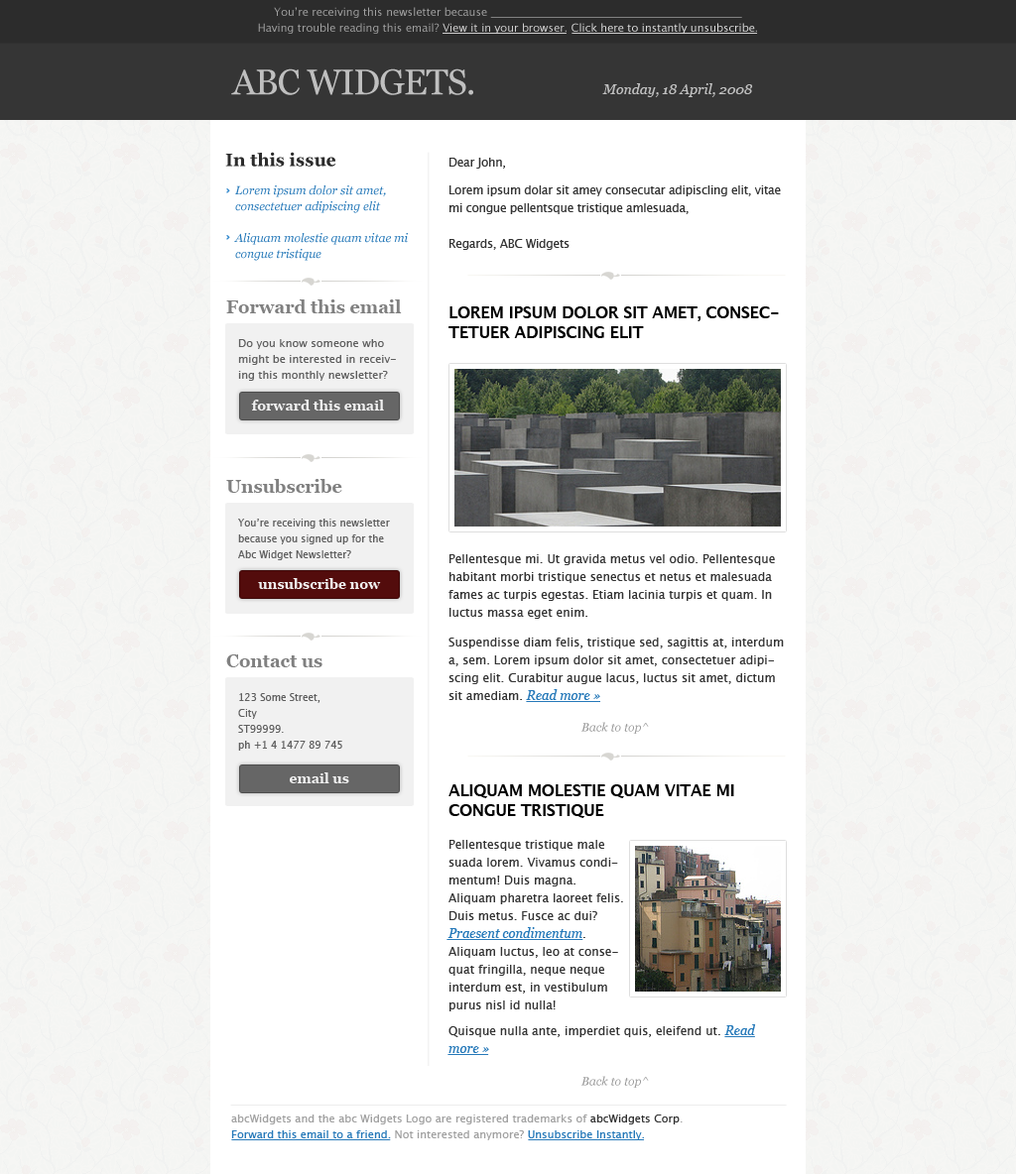
<style>
.page{position:relative;width:1016px;height:1174px;background:#ffffff}
.page>*{position:absolute;margin:0}
.t1{font:10.9px/15.9px "LucidaGrande";color:#a1a1a1}
.t2{font:10.9px/15.9px "LucidaGrande";color:#d0cfcf}
.t3{font:10.9px/15.9px "LucidaGrande";color:#dbdbdb}
.t4{font:35.7px "Georgia";letter-spacing:-0.03em;color:#bfbfbf;text-transform:uppercase}
.t5{font:13.9px "Georgia-Italic";color:#bfbfbf}
.t6{font:17.9px "Georgia-Bold";color:#2c2c2c}
.t7{font:11.9px/17.9px "LucidaGrande";letter-spacing:-0.025em;color:#333333}
.t8{font:11.9px/19.8px "LucidaGrande";letter-spacing:-0.025em;color:#333333}
.t9{font:11.9px/9.9px "LucidaGrande";letter-spacing:-0.025em;color:#000000}
.t10{font:11.9px/15.9px "Georgia-Italic";color:#2679b9}
.t11{font:17.9px "Georgia-Bold";color:#808080}
.t12{font:15.9px/19.8px "LucidaGrande-Bold";letter-spacing:-0.025em;color:#000000;text-transform:uppercase}
.t13{font:10.9px/15.9px "LucidaGrande";color:#5f5f5f}
.t14{font:13.9px "Georgia-Bold";color:#f0f0f0}
.t15{font:9.9px/15.9px "LucidaGrande";color:#5f5f5f}
.t16{font:11.9px/17.9px "LucidaGrande";color:#333333}
.t17{font:12.9px/17.9px "Georgia-Italic";color:#2679b9}
.t18{font:11.9px "Georgia-Italic";color:#999999}
.t19{font:10.9px/14.9px "LucidaGrande";color:#a1a1a1}
.t20{font:10.9px/14.9px "LucidaGrande";color:#333333}
.t21{font:10.9px/15.9px "LucidaGrande";color:#2679b9}
</style>
<div class="page">
<p class="t1" style="left:258px;top:7px;width:499px;height:27px;text-align:center">You’re receiving this newsletter because ______________________________________________<br>Having trouble reading this email? <span class="t2">View it in your browser</span>. <span class="t3">Click here to instantly unsubscribe</span>.</p>
<p class="t4" style="left:231px;top:68px;width:242px;height:27px">ABC Widgets.</p>
<p class="t5" style="left:602px;top:83px;width:151px;height:14px">Monday, 18 April, 2008</p>
<p class="t6" style="left:225px;top:152px;width:111px;height:15px">In this issue</p>
<p class="t7" style="left:449px;top:158px;width:331px;height:92px"><span class="t8">Dear John,<br></span><span class="t9"><br></span>Lorem ipsum dolar sit amey consecutar adipiscling elit, vitae mi congue pellentsque tristique amlesuada,<br><br>Regards, ABC Widgets</p>
<p class="t10" style="left:234px;top:185px;width:174px;height:76px">Lorem ipsum dolor sit amet, consectetuer adipiscing elit<br>Aliquam molestie quam vitae mi congue tristique</p>
<p class="t11" style="left:226px;top:300px;width:176px;height:13px">Forward this email</p>
<p class="t12" style="left:448px;top:306px;width:331px;height:32px">Lorem ipsum dolor sit amet, consectetuer adipiscing elit</p>
<p class="t13" style="left:238px;top:339px;width:158px;height:42px">Do you know someone who might be interested in receiving this monthly newsletter?</p>
<p class="t14" style="left:251px;top:400px;width:133px;height:11px">forward this email</p>
<p class="t11" style="left:226px;top:479px;width:116px;height:14px">Unsubscribe</p>
<p class="t15" style="left:238px;top:519px;width:152px;height:41px">You’re receiving this newsletter because you signed up for the Abc Widget Newsletter<span class="t13">?</span></p>
<p class="t16" style="left:448px;top:554px;width:335px;height:146px">Pellentesque mi. Ut gravida metus vel odio. Pellentesque habitant morbi tristique senectus et netus et malesuada fames ac turpis egestas. Etiam lacinia turpis et quam. In luctus massa eget enim.<br>Suspendisse diam felis, tristique sed, sagittis at, interdum a, sem. Lorem ipsum dolor sit amet, consectetuer adipiscing elit. Curabitur augue lacus, luctus sit amet, dictum sit amediam. <span class="t17">Read more »</span></p>
<p class="t14" style="left:258px;top:578px;width:123px;height:11px">unsubscribe now</p>
<p class="t11" style="left:226px;top:655px;width:96px;height:12px">Contact us</p>
<p class="t15" style="left:238px;top:693px;width:104px;height:58px">123 Some Street,<br>City<br>ST99999.<br>ph +1 4 1477 89 745</p>
<p class="t18" style="left:581px;top:722px;width:68px;height:12px">Back to top^</p>
<p class="t14" style="left:290px;top:773px;width:59px;height:10px">email us</p>
<p class="t16" style="left:447px;top:784px;width:309px;height:269px"><span class="t12">Aliquam molestie quam vitae mi congue tristique</span><br>Pellentesque tristique male<br>suada lorem. Vivamus condi-<br>mentum! Duis magna. <br>Aliquam pharetra laoreet felis. <br>Duis metus. Fusce ac dui? <br><span class="t17">Praesent condimentum</span>. <br>Aliquam luctus, leo at conse-<br>quat fringilla, neque neque <br>interdum est, in vestibulum <br>purus nisl id nulla!<br>Quisque nulla ante, imperdiet quis, eleifend ut. <span class="t17">Read more »</span></p>
<p class="t18" style="left:581px;top:1076px;width:68px;height:12px">Back to top^</p>
<p class="t19" style="left:231px;top:1115px;width:451px;height:25px">abcWidgets and the abc Widgets Logo are registered trademarks of <span class="t20">abcWidgets Corp</span>.<br><span class="t21">Forward this email to a friend.</span><span class="t1"> Not interested anymore? </span><span class="t21">Unsubscribe Instantly.</span></p>
</div>
